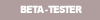
<style>
.page{position:relative;width:100px;height:20px;background:#b09d9d}
.page>*{position:absolute;margin:0}
.t1{font:10px "Arial-Black";color:#ffffff;scale:0.9 1}
</style>
<div class="page">
<p class="t1" style="left:20px;top:5px;width:7px;height:8px">B</p>
<p class="t1" style="left:26px;top:5px;width:6px;height:8px">E</p>
<p class="t1" style="left:32px;top:5px;width:7px;height:8px">T</p>
<p class="t1" style="left:37px;top:5px;width:7px;height:8px">A</p>
<p class="t1" style="left:48px;top:5px;width:7px;height:8px">T</p>
<p class="t1" style="left:53px;top:5px;width:6px;height:8px">E</p>
<p class="t1" style="left:59px;top:5px;width:6px;height:8px">S</p>
<p class="t1" style="left:64px;top:5px;width:7px;height:8px">T</p>
<p class="t1" style="left:69px;top:5px;width:6px;height:8px">E</p>
<p class="t1" style="left:75px;top:5px;width:7px;height:8px">R</p>
<p class="t1" style="left:45px;top:9px;width:3px;height:3px">-</p>
</div>
